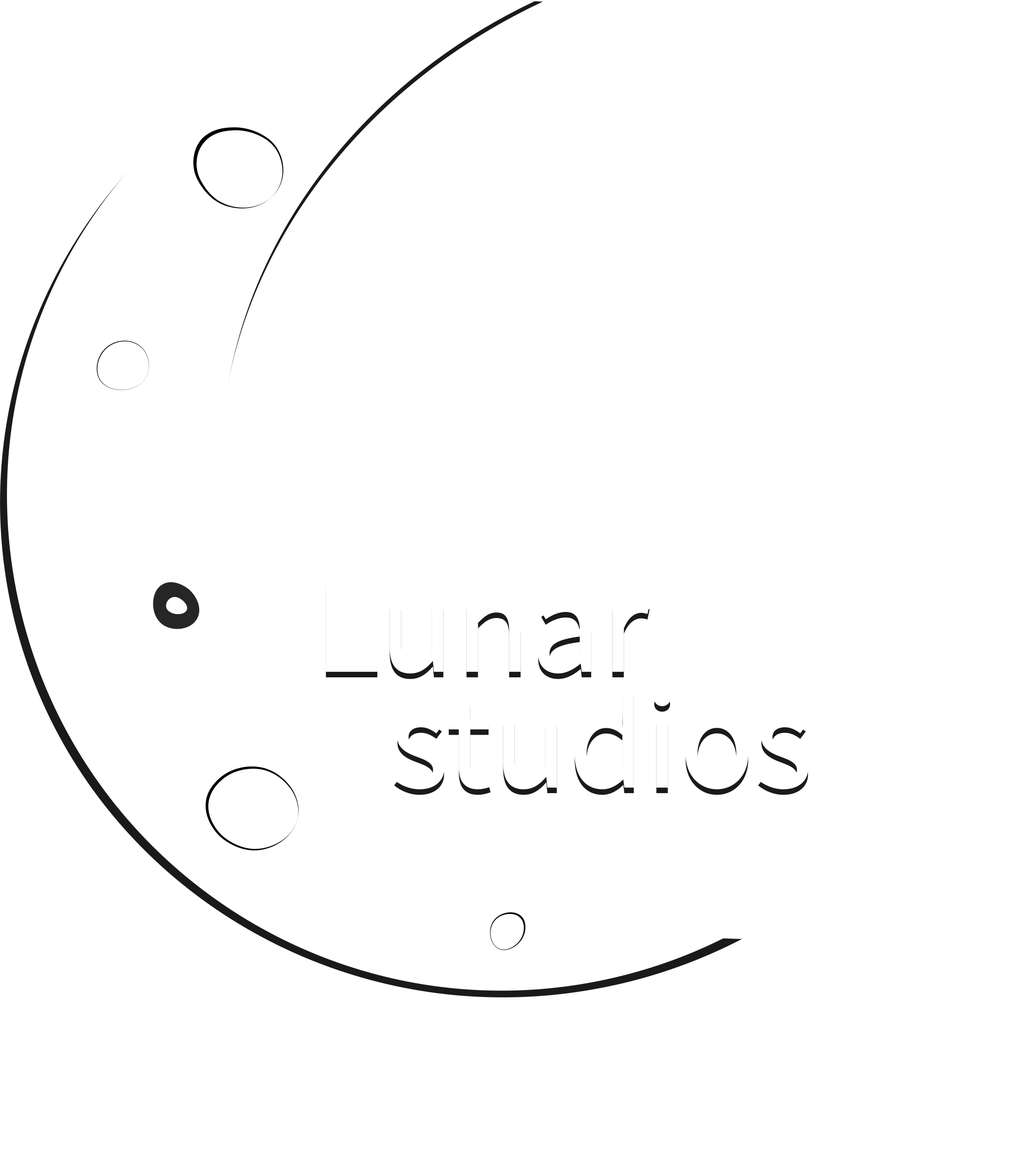
<style>
.page{position:relative;width:1033px;height:1154px;background:#ffffff}
.page>*{position:absolute;margin:0}
.t1{font:139px "SourceSansRoman-Regular";color:#ffffff}
</style>
<div class="page">
<p class="t1" style="left:326px;top:586px;width:483px;height:209px">Lunar studios</p>
</div>
